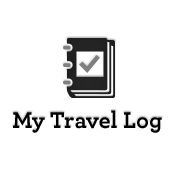
<style>
.page{position:relative;width:175px;height:175px;background:#ffffff}
.page>*{position:absolute;margin:0}
.t1{font:24px "Archer-Bold";color:#000000}
</style>
<div class="page">
<p class="t1" style="left:13px;top:110px;width:149px;height:23px">My Travel Log</p>
</div>
